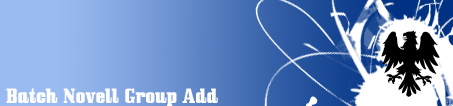
<style>
.page{position:relative;width:453px;height:106px}
.page>*{position:absolute;margin:0}
.t1{font:18px "Bullpen";color:#ffffff}
</style>
<div class="page">
<p class="t1" style="left:6px;top:88px;width:212px;height:19px">Batch Novell Group Add</p>
</div>
